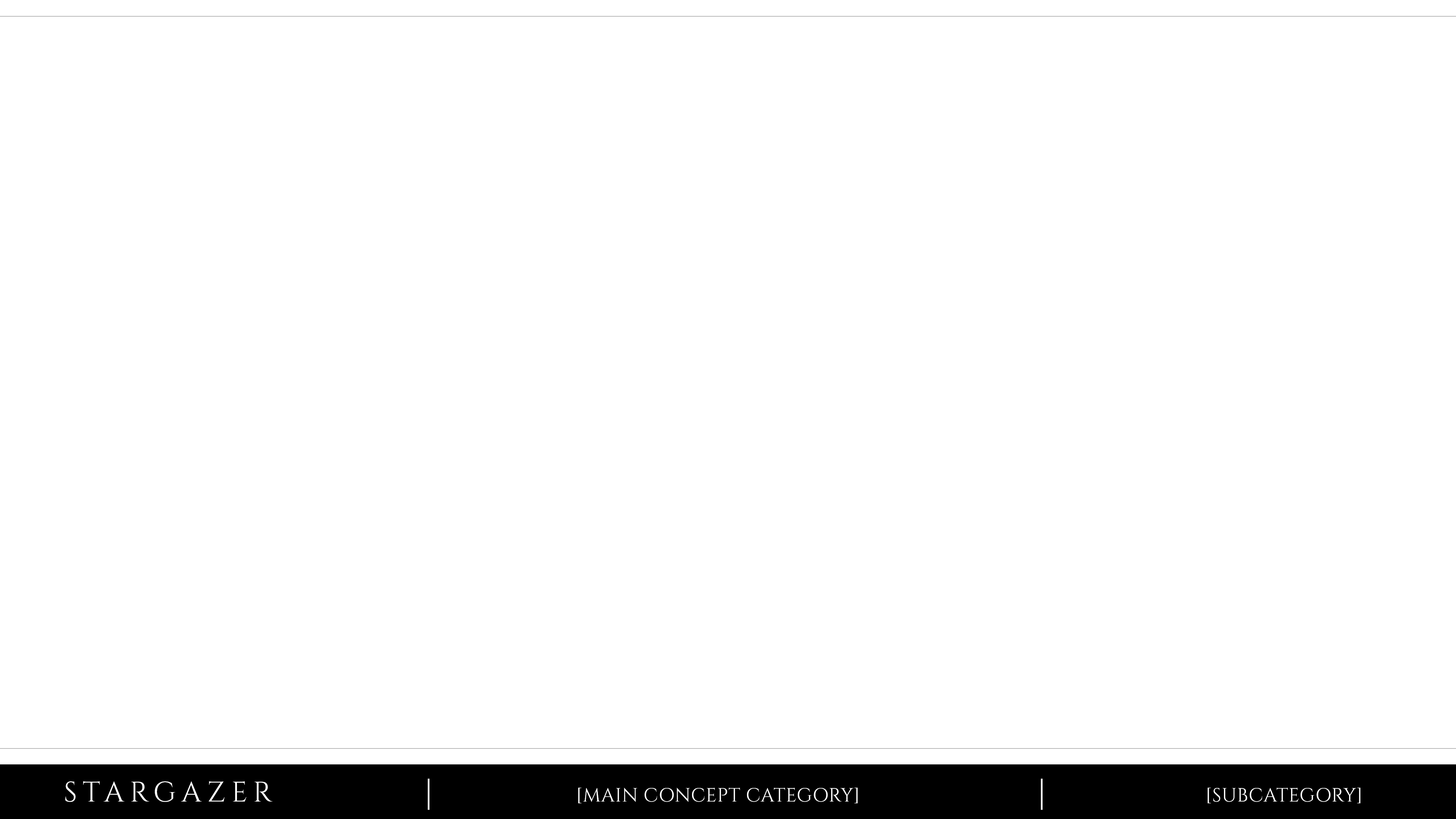
<style>
.page{position:relative;width:1456px;height:819px;background:#ffffff}
.page>*{position:absolute;margin:0}
.t1{font:28.3px "Cinzel-Regular";letter-spacing:0.2em;color:#ffffff}
.t2{font:35.3px "Cinzel-Regular";letter-spacing:0.02em;color:#ffffff}
.t3{font:19.2px "Cinzel-Regular";letter-spacing:0.02em;color:#ffffff}
</style>
<div class="page">
<p class="t1" style="left:65px;top:781px;width:208px;height:21px">STARGAZER</p>
<p class="t2" style="left:428px;top:778px;width:2px;height:32px">|</p>
<p class="t2" style="left:1041px;top:778px;width:2px;height:32px">|</p>
<p class="t3" style="left:578px;top:788px;width:280px;height:15px">[MAIN CONCEPT CATEGORY]</p>
<p class="t3" style="left:1208px;top:788px;width:152px;height:15px">[SUBCATEGORY]</p>
</div>
